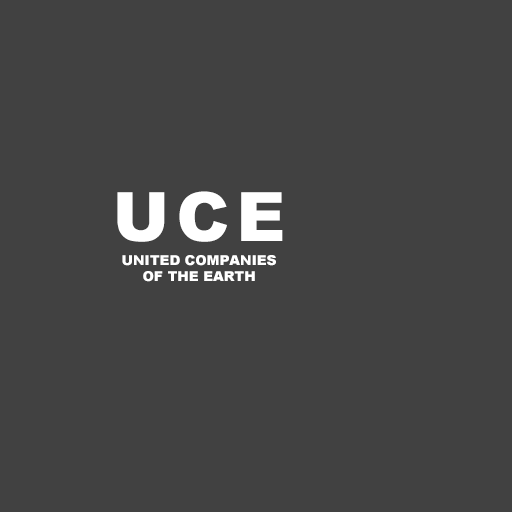
<style>
.page{position:relative;width:512px;height:512px;background:#414141}
.page>*{position:absolute;margin:0}
.t1{font:68.3px "Arial-Black";letter-spacing:0.1em;color:#ffffff}
.t2{font:13.7px "Arial-Black";color:#ffffff}
</style>
<div class="page">
<p class="t1" style="left:117px;top:191px;width:166px;height:51px">UCE</p>
<p class="t2" style="left:122px;top:255px;width:154px;height:11px">UNITED COMPANIES</p>
<p class="t2" style="left:143px;top:271px;width:112px;height:11px">OF THE EARTH</p>
</div>
